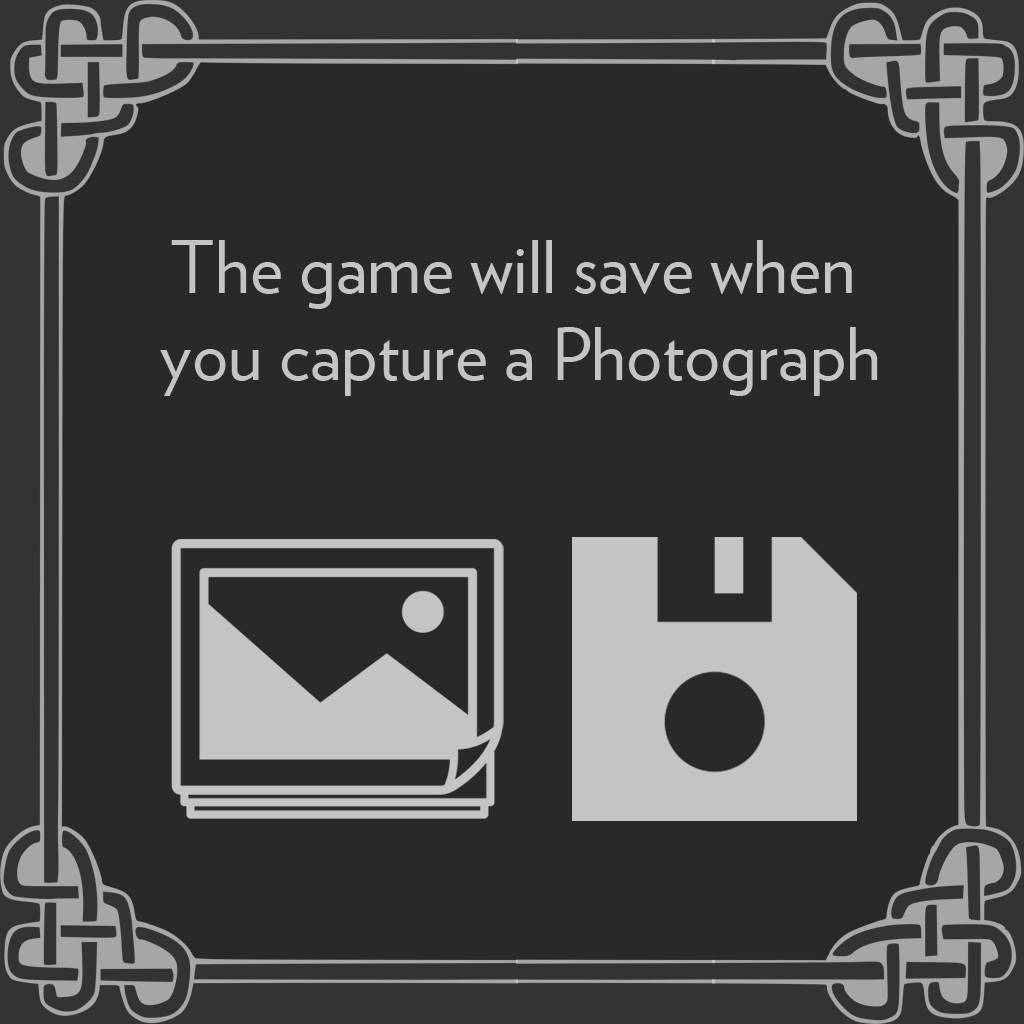
<style>
.page{position:relative;width:1024px;height:1024px;background:#292929}
.page>*{position:absolute;margin:0}
.t1{font:72px "Verlag-Book";color:#c4c4c4}
</style>
<div class="page">
<p class="t1" style="left:160px;top:240px;width:718px;height:156px;text-align:center">The game will save when <br>you capture a Photograph</p>
</div>
